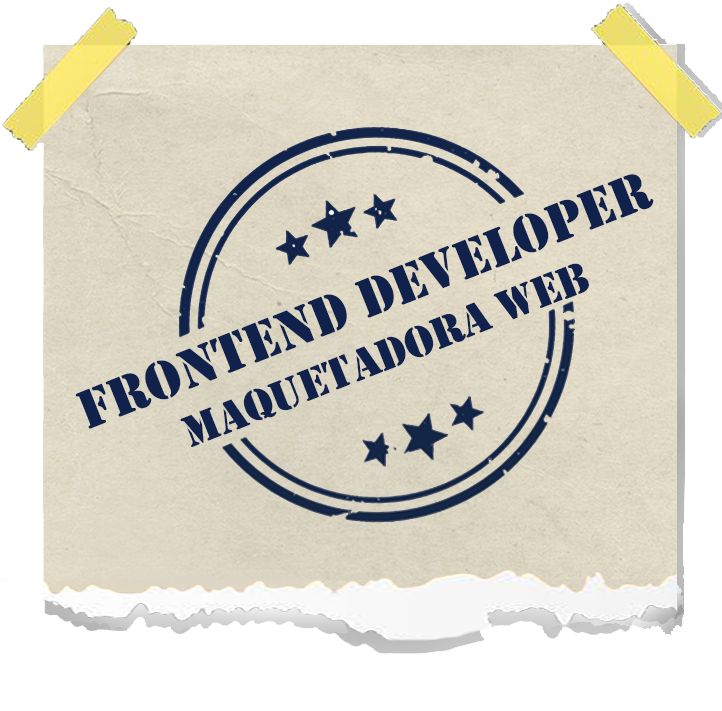
<style>
.page{position:relative;width:722px;height:711px;background:#ffffff}
.page>*{position:absolute;margin:0}
.t1{font:56.4px "Stencil";color:#10224c}
.t2{font:45.8px "Stencil";color:#10224c}
</style>
<div class="page">
<p class="t1" style="left:75px;top:174px;width:579px;height:273px;text-align:center;rotate:-22deg">frontend developer<br><span class="t2">maquetadora web</span></p>
</div>
